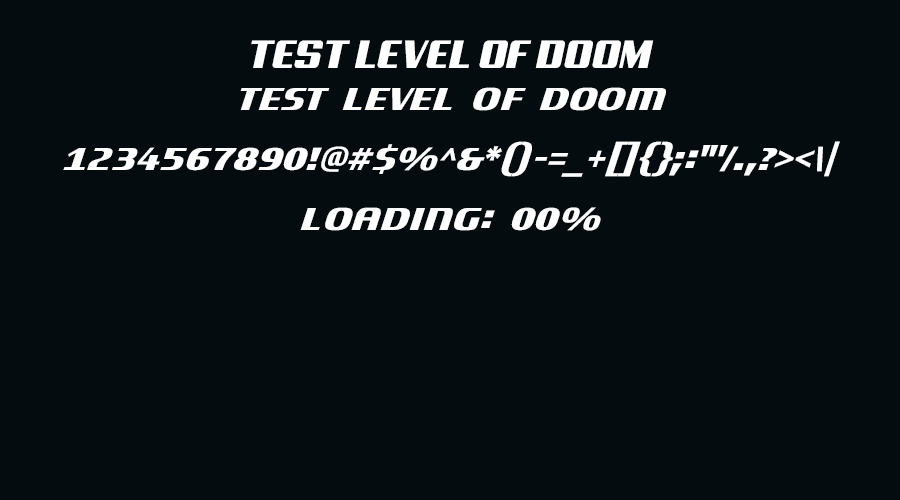
<style>
.page{position:relative;width:900px;height:500px;background:#050c0f}
.page>*{position:absolute;margin:0}
.t1{font:40px "Aero";color:#ffffff;text-transform:uppercase}
.t2{font:50px "Motorwerk";color:#ffffff}
</style>
<div class="page">
<p class="t1" style="left:251px;top:40px;width:403px;height:28px">Test Level of Doom</p>
<p class="t2" style="left:63px;top:87px;width:777px;height:144px;text-align:center">Test level of Doom<br>1234567890!@#$%^&amp;*()-=_+[]{};:'"/.,?&gt;&lt;\|<br>Loading: 00%</p>
</div>
